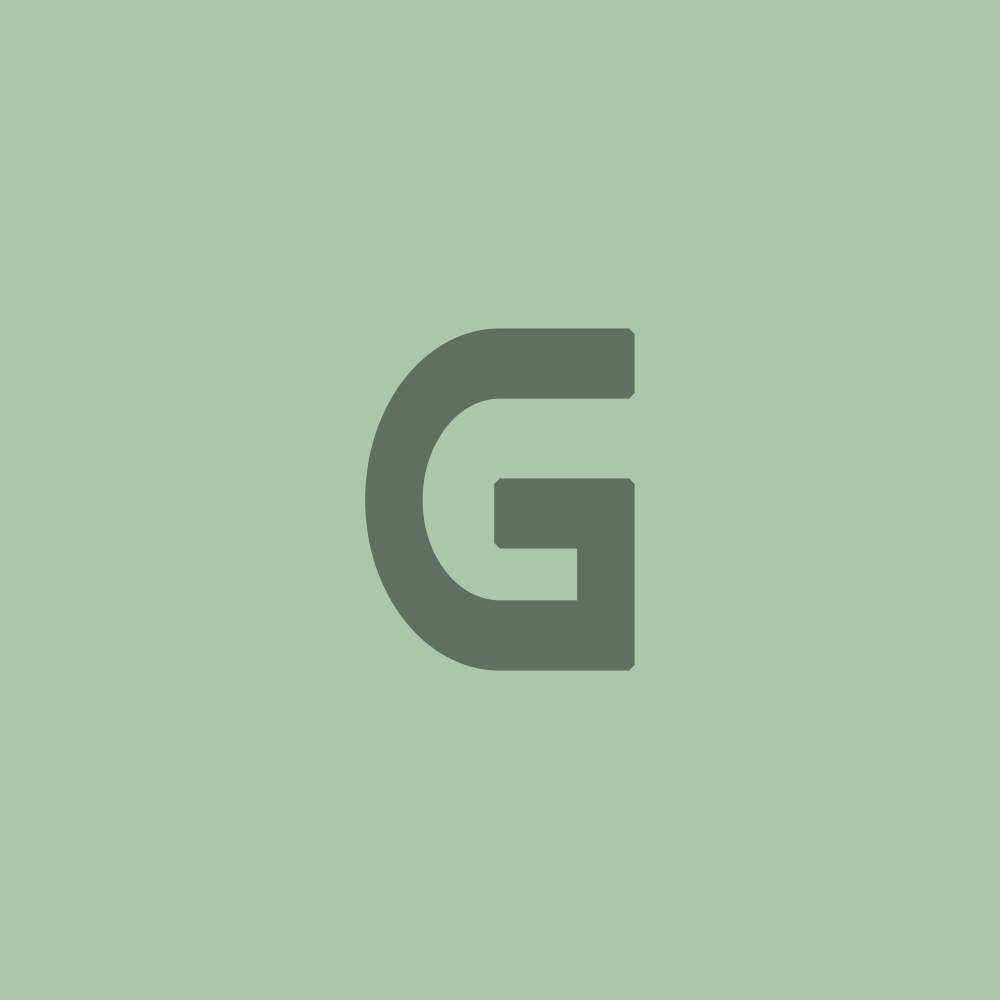
<style>
.page{position:relative;width:1000px;height:1000px;background:#abc7ab}
.page>*{position:absolute;margin:0}
.t1{font:472.3px "AzonixRegular";color:#5f705f;font-weight:bold;scale:0.78 1}
</style>
<div class="page">
<p class="t1" style="left:365px;top:328px;width:270px;height:343px">G</p>
</div>
